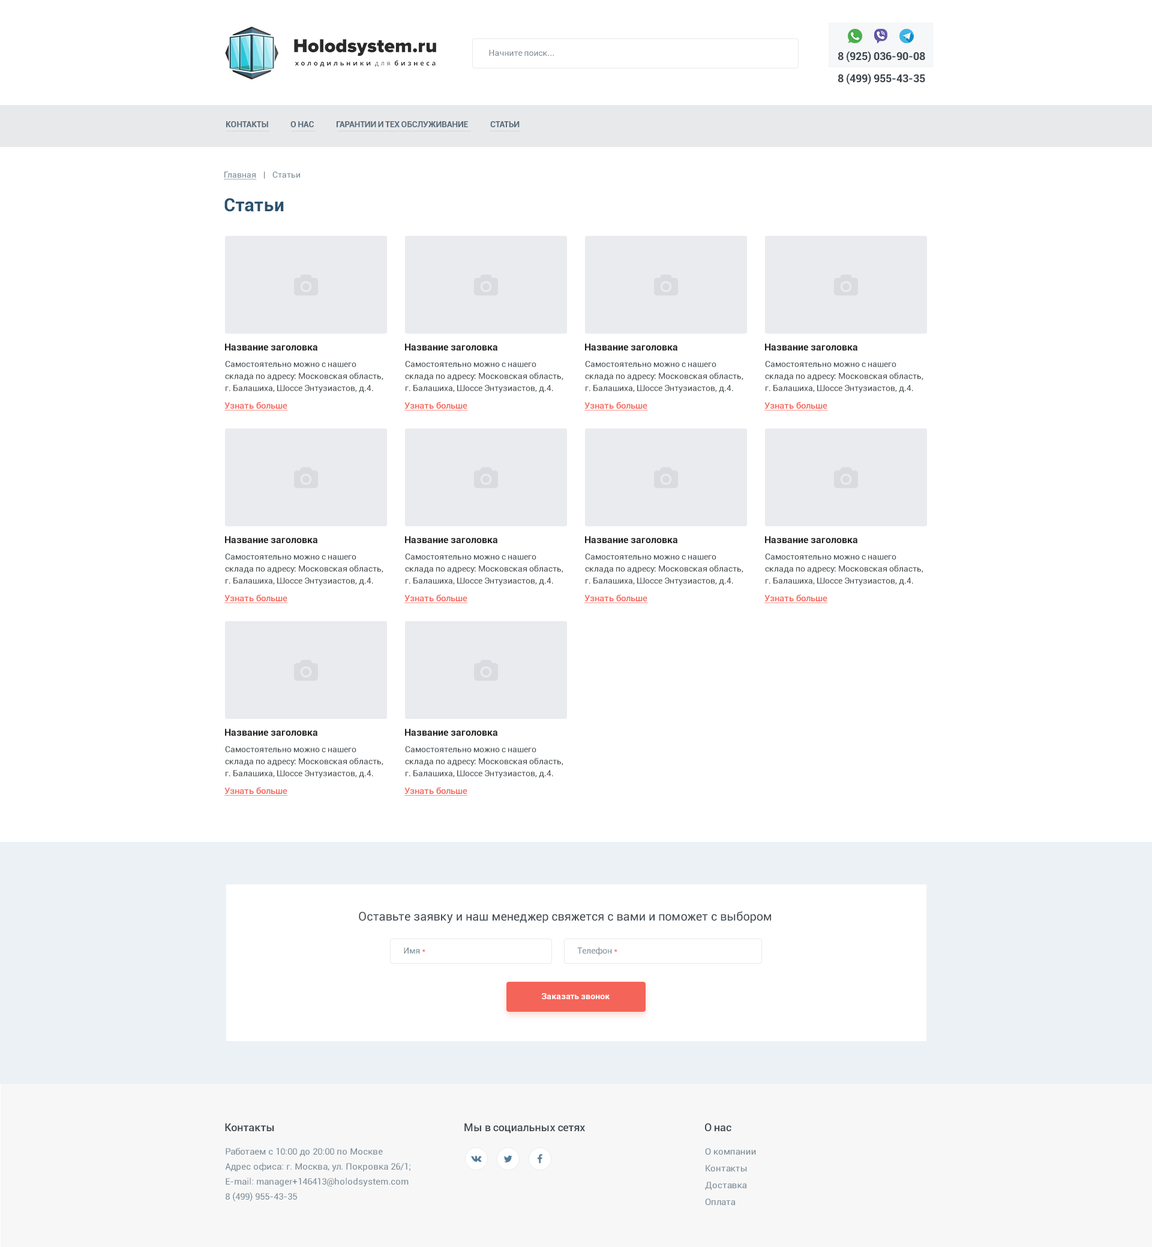
<style>
.page{position:relative;width:1152px;height:1247px;background:#ffffff}
.page>*{position:absolute;margin:0}
.t1{font:8.4px "Roboto-Regular";color:#788995}
.t2{font:10.8px "Roboto-Bold";color:#3b444b}
.t3{font:8.4px "Roboto-Bold";letter-spacing:-0.026em;color:#586976;text-transform:uppercase}
.t4{font:8.4px "Roboto-Regular";color:#788995;text-decoration:underline}
.t5{font:18px "Roboto-Bold";letter-spacing:0.005em;color:#29516d}
.t6{font:9.6px "Roboto-Bold";color:#1f2123}
.t7{font:8.4px/12px "Roboto-Regular";color:#3d454a}
.t8{font:9px "Roboto-Medium";color:#f56458;text-decoration:underline}
.t9{font:12px "Roboto-Regular";letter-spacing:0.005em;color:#3f484f}
.t10{font:8.4px "Roboto-Regular";color:#f56458}
.t11{font:8.4px "Roboto-Bold";color:#ffffff}
.t12{font:10.8px "Roboto-Medium";color:#3f484f}
.t13{font:9px/15px "Roboto-Regular";color:#788995}
.t14{font:9px/16.8px "Roboto-Regular";color:#788995}
</style>
<div class="page">
<p class="t1" style="left:489px;top:50px;width:65px;height:6px">Начните поиск...</p>
<p class="t2" style="left:838px;top:51px;width:87px;height:11px">8 (925) 036-90-08</p>
<p class="t2" style="left:838px;top:73px;width:87px;height:12px">8 (499) 955-43-35</p>
<p class="t3" style="left:226px;top:121px;width:294px;height:6px">Контакты              О нас              Гарантии и тех обслуживание              Статьи</p>
<p class="t1" style="left:224px;top:172px;width:76px;height:7px"><span class="t4">Главная</span>    |    Статьи</p>
<p class="t5" style="left:224px;top:198px;width:60px;height:14px">Статьи</p>
<p class="t6" style="left:225px;top:343px;width:93px;height:8px">Название заголовка</p>
<p class="t6" style="left:405px;top:343px;width:93px;height:8px">Название заголовка</p>
<p class="t6" style="left:585px;top:343px;width:93px;height:8px">Название заголовка</p>
<p class="t6" style="left:765px;top:343px;width:93px;height:8px">Название заголовка</p>
<p class="t7" style="left:225px;top:361px;width:158px;height:32px">Cамостоятельно можно с нашего склада по адресу: Московская область, г. Балашиха, Шоссе Энтузиастов, д.4.</p>
<p class="t7" style="left:405px;top:361px;width:158px;height:32px">Cамостоятельно можно с нашего склада по адресу: Московская область, г. Балашиха, Шоссе Энтузиастов, д.4.</p>
<p class="t7" style="left:585px;top:361px;width:158px;height:32px">Cамостоятельно можно с нашего склада по адресу: Московская область, г. Балашиха, Шоссе Энтузиастов, д.4.</p>
<p class="t7" style="left:765px;top:361px;width:158px;height:32px">Cамостоятельно можно с нашего склада по адресу: Московская область, г. Балашиха, Шоссе Энтузиастов, д.4.</p>
<p class="t8" style="left:224px;top:401px;width:64px;height:9px">Узнать больше</p>
<p class="t8" style="left:404px;top:401px;width:64px;height:9px">Узнать больше</p>
<p class="t8" style="left:584px;top:401px;width:64px;height:9px">Узнать больше</p>
<p class="t8" style="left:764px;top:401px;width:64px;height:9px">Узнать больше</p>
<p class="t6" style="left:225px;top:536px;width:93px;height:8px">Название заголовка</p>
<p class="t6" style="left:405px;top:536px;width:93px;height:8px">Название заголовка</p>
<p class="t6" style="left:585px;top:536px;width:93px;height:8px">Название заголовка</p>
<p class="t6" style="left:765px;top:536px;width:93px;height:8px">Название заголовка</p>
<p class="t7" style="left:225px;top:553px;width:158px;height:33px">Cамостоятельно можно с нашего склада по адресу: Московская область, г. Балашиха, Шоссе Энтузиастов, д.4.</p>
<p class="t7" style="left:405px;top:553px;width:158px;height:33px">Cамостоятельно можно с нашего склада по адресу: Московская область, г. Балашиха, Шоссе Энтузиастов, д.4.</p>
<p class="t7" style="left:585px;top:553px;width:158px;height:33px">Cамостоятельно можно с нашего склада по адресу: Московская область, г. Балашиха, Шоссе Энтузиастов, д.4.</p>
<p class="t7" style="left:765px;top:553px;width:158px;height:33px">Cамостоятельно можно с нашего склада по адресу: Московская область, г. Балашиха, Шоссе Энтузиастов, д.4.</p>
<p class="t8" style="left:224px;top:594px;width:64px;height:9px">Узнать больше</p>
<p class="t8" style="left:404px;top:594px;width:64px;height:9px">Узнать больше</p>
<p class="t8" style="left:584px;top:594px;width:64px;height:9px">Узнать больше</p>
<p class="t8" style="left:764px;top:594px;width:64px;height:9px">Узнать больше</p>
<p class="t6" style="left:225px;top:728px;width:93px;height:8px">Название заголовка</p>
<p class="t6" style="left:405px;top:728px;width:93px;height:8px">Название заголовка</p>
<p class="t7" style="left:225px;top:746px;width:158px;height:32px">Cамостоятельно можно с нашего склада по адресу: Московская область, г. Балашиха, Шоссе Энтузиастов, д.4.</p>
<p class="t7" style="left:405px;top:746px;width:158px;height:32px">Cамостоятельно можно с нашего склада по адресу: Московская область, г. Балашиха, Шоссе Энтузиастов, д.4.</p>
<p class="t8" style="left:224px;top:787px;width:64px;height:9px">Узнать больше</p>
<p class="t8" style="left:404px;top:787px;width:64px;height:9px">Узнать больше</p>
<p class="t9" style="left:359px;top:911px;width:412px;height:12px">Оставьте заявку и наш менеджер свяжется с вами и поможет с выбором</p>
<p class="t1" style="left:404px;top:947px;width:21px;height:6px">Имя <span class="t10">*</span></p>
<p class="t1" style="left:577px;top:947px;width:40px;height:8px">Телефон <span class="t10">*</span></p>
<p class="t11" style="left:542px;top:993px;width:68px;height:7px">Заказать звонок</p>
<p class="t12" style="left:225px;top:1123px;width:49px;height:9px">Контакты</p>
<p class="t12" style="left:464px;top:1123px;width:121px;height:10px">Мы в социальных сетях</p>
<p class="t12" style="left:705px;top:1123px;width:26px;height:9px">О нас</p>
<p class="t13" style="left:225px;top:1147px;width:185px;height:54px">Работаем с 10:00 до 20:00 по Москве <br>Адрес офиса: г. Москва, ул. Покровка 26/1; <br>E-mail: manager+146413@holodsystem.com <br>8 (499) 955-43-35</p>
<p class="t14" style="left:705px;top:1148px;width:51px;height:57px">О компании <br>Контакты <br>Доставка <br>Оплата</p>
</div>
